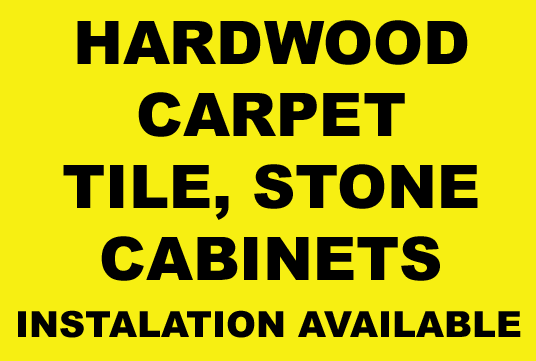
<style>
.page{position:relative;width:536px;height:361px;background:#f7ef12}
.page>*{position:absolute;margin:0}
.t1{font:60px "Arial-Black";color:#000000}
.t2{font:36px "Arial-Black";color:#000000}
</style>
<div class="page">
<p class="t1" style="left:63px;top:20px;width:415px;height:261px;text-align:center">HARDWOOD<br>CARPET<br>TILE, STONE<br>CABINETS</p>
<p class="t2" style="left:18px;top:310px;width:503px;height:28px">INSTALATION AVAILABLE</p>
</div>
